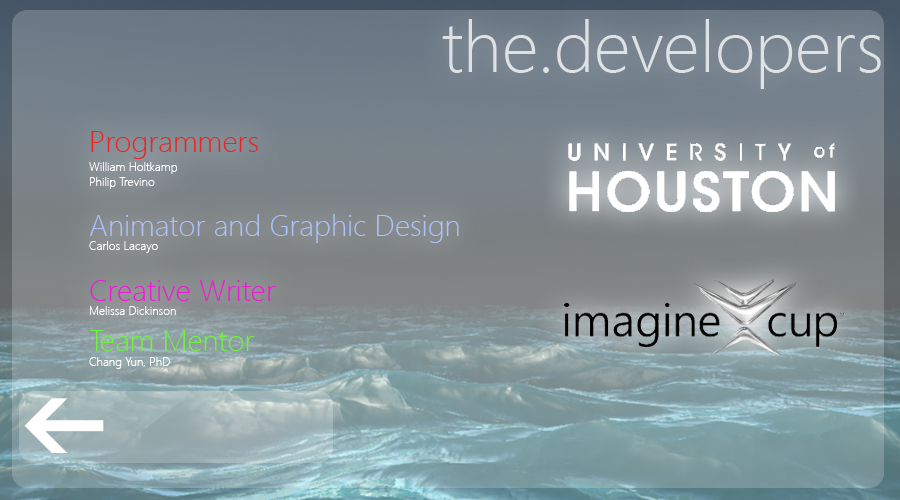
<style>
.page{position:relative;width:900px;height:500px}
.page>*{position:absolute;margin:0}
.t1{font:72px "SegoeUI-Light";color:#dfe2e5}
.t2{font:30px "SegoeUI-Light";color:#acc1fd}
.t3{font:30px "SegoeUI-Light";color:#ee2424}
.t4{font:12px/19px "SegoeUI-Light";color:#ffffff}
.t5{font:12px "SegoeUI-Light";color:#ffffff}
.t6{font:30px "SegoeUI-Light";color:#f01ad4}
.t7{font:30px "SegoeUI-Light";color:#6df43e}
</style>
<div class="page">
<p class="t1" style="left:442px;top:19px;width:439px;height:70px">the.developers</p>
<p class="t2" style="left:89px;top:131px;width:370px;height:238px"><span class="t3">Programmers<br></span><span class="t4">William Holtkamp<br></span><span class="t5">Philip Trevino<br><br></span>Animator and Graphic Design<br><span class="t5">Carlos Lacayo<br><br></span><span class="t6">Creative Writer<br></span><span class="t5">Melissa Dickinson<br></span><span class="t7">Team Mentor<br></span><span class="t5">Chang Yun, PhD</span></p>
</div>
